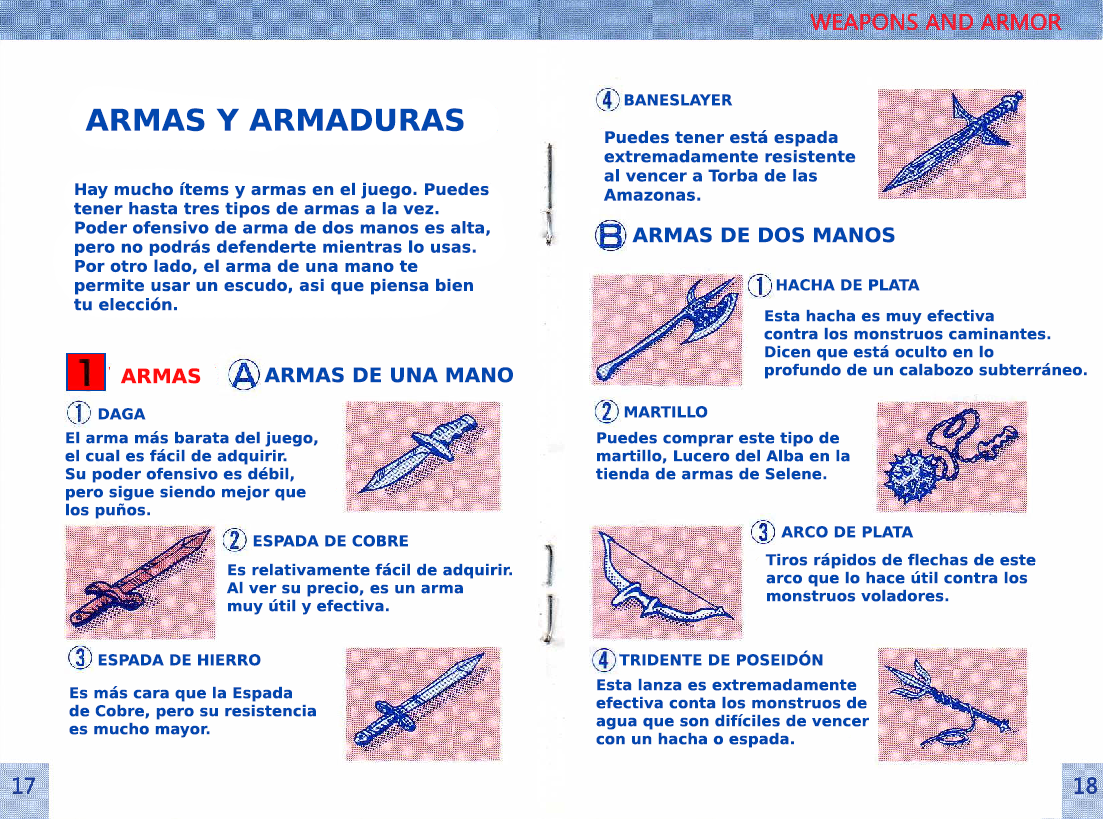
<style>
.page{position:relative;width:1103px;height:819px;background:#fefefe}
.page>*{position:absolute;margin:0}
.t1{font:15px "PrimaSansBT-Bold";color:#0247af}
.t2{font:30px "PrimaSansBT-Bold";color:#0247af}
.t3{font:16px "PrimaSansBT-Bold";color:#0247af}
.t4{font:20px "PrimaSansBT-Bold";color:#0247af}
.t5{font:20px "PrimaSansBT-Bold";color:#ff0e0f}
</style>
<div class="page">
<p class="t1" style="left:624px;top:94px;width:109px;height:12px">BANESLAYER</p>
<p class="t2" style="left:85px;top:108px;width:379px;height:24px">ARMAS Y ARMADURAS</p>
<p class="t3" style="left:603px;top:130px;width:253px;height:71px">Puedes tener está espada<br>extremadamente resistente<br>al vencer a Torba de las <br>Amazonas.</p>
<p class="t3" style="left:74px;top:182px;width:416px;height:129px">Hay mucho ítems y armas en el juego. Puedes<br>tener hasta tres tipos de armas a la vez.<br>Poder ofensivo de arma de dos manos es alta,<br>pero no podrás defenderte mientras lo usas.<br>Por otro lado, el arma de una mano te<br>permite usar un escudo, asi que piensa bien<br>tu elección.</p>
<p class="t4" style="left:632px;top:227px;width:263px;height:16px">ARMAS DE DOS MANOS</p>
<p class="t1" style="left:776px;top:279px;width:144px;height:12px">HACHA DE PLATA</p>
<p class="t1" style="left:764px;top:309px;width:323px;height:70px">Esta hacha es muy efectiva<br>contra los monstruos caminantes.<br>Dicen que está oculto en lo<br>profundo de un calabozo subterráneo.</p>
<p class="t5" style="left:120px;top:368px;width:81px;height:16px">ARMAS</p>
<p class="t4" style="left:264px;top:367px;width:249px;height:16px">ARMAS DE UNA MANO</p>
<p class="t1" style="left:98px;top:408px;width:48px;height:12px">DAGA</p>
<p class="t1" style="left:624px;top:406px;width:84px;height:12px">MARTILLO</p>
<p class="t1" style="left:65px;top:431px;width:253px;height:88px">El arma más barata del juego,<br>el cual es fácil de adquirir.<br>Su poder ofensivo es débil,<br>pero sigue siendo mejor que <br>los puños.</p>
<p class="t1" style="left:596px;top:431px;width:254px;height:49px">Puedes comprar este tipo de<br>martillo, Lucero del Alba en la<br>tienda de armas de Selene.</p>
<p class="t1" style="left:781px;top:526px;width:133px;height:12px">ARCO DE PLATA</p>
<p class="t1" style="left:253px;top:535px;width:155px;height:12px">ESPADA DE COBRE</p>
<p class="t1" style="left:765px;top:553px;width:271px;height:49px">Tiros rápidos de flechas de este<br>arco que lo hace útil contra los<br>monstruos voladores.</p>
<p class="t1" style="left:226px;top:563px;width:286px;height:52px">Es relativamente fácil de adquirir.<br>Al ver su precio, es un arma<br>muy útil y efectiva.</p>
<p class="t1" style="left:98px;top:654px;width:163px;height:12px">ESPADA DE HIERRO</p>
<p class="t1" style="left:619px;top:650px;width:204px;height:16px">TRIDENTE DE POSEIDÓN</p>
<p class="t1" style="left:596px;top:678px;width:273px;height:70px">Esta lanza es extremadamente<br>efectiva conta los monstruos de<br>agua que son difíciles de vencer<br>con un hacha o espada.</p>
<p class="t1" style="left:69px;top:686px;width:247px;height:52px">Es más cara que la Espada<br>de Cobre, pero su resistencia<br>es mucho mayor.</p>
</div>
